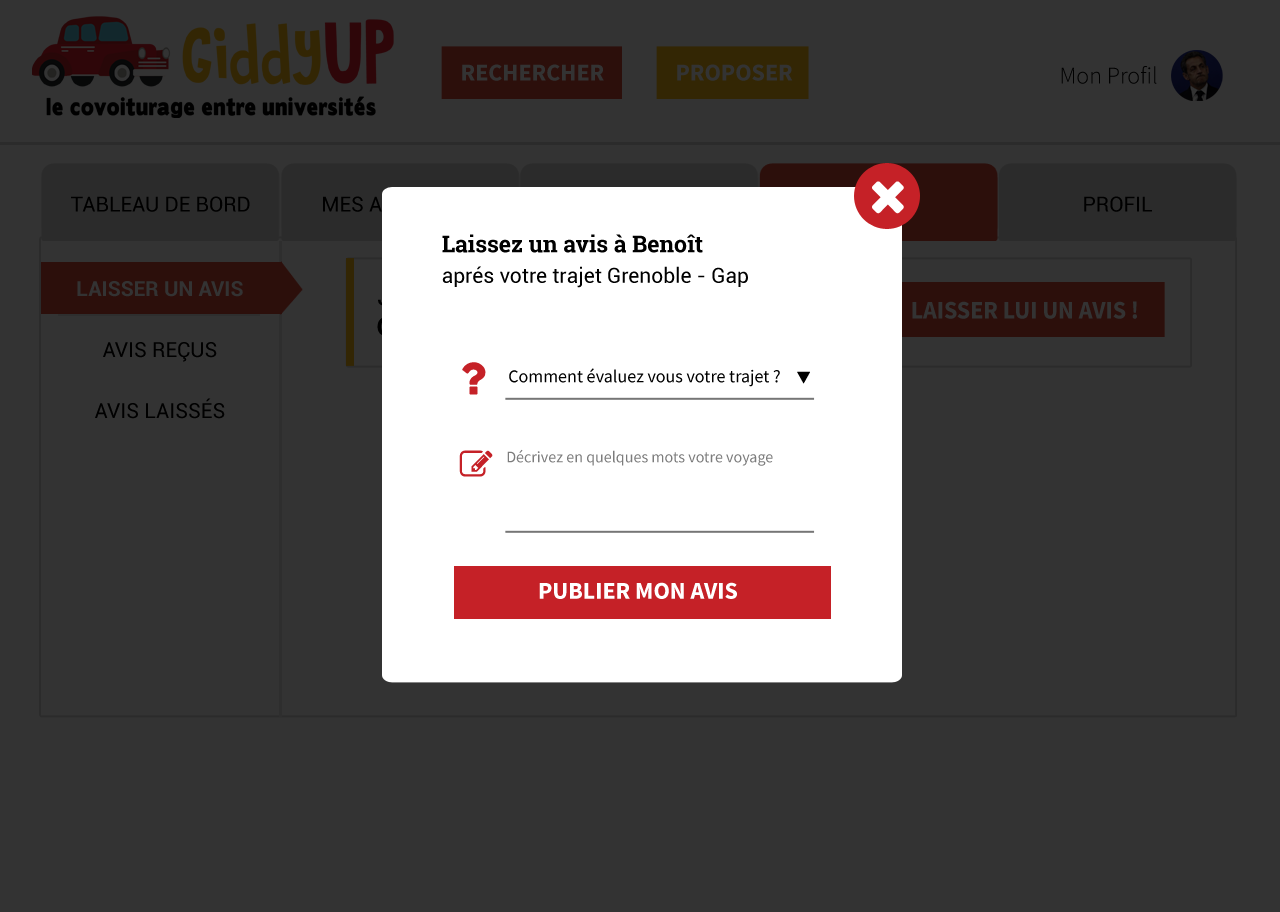
<style>
.page{position:relative;width:1280px;height:912px;background:#333333}
.page>*{position:absolute;margin:0}
.t1{font:24px "SourceSansPro-Bold";color:#333333;text-transform:uppercase}
.t2{font:24px "SourceSansPro-Light";color:#000000}
.t3{font:21px "Roboto-Regular";color:#000000;text-transform:uppercase}
.t4{font:21px/30.5px "Roboto-Regular";color:#000000}
.t5{font:23px/30.5px "RobotoSlab-Bold";color:#000000}
.t6{font:21px/30.5px "Roboto-Regular";text-transform:uppercase}
.t7{font:21px/30.5px "Roboto-Bold";text-transform:uppercase}
.t8{font:25.1px "SourceSansPro-Bold";color:#333333;text-transform:uppercase;scale:0.95 1}
.t9{font:18.1px "SourceSansPro-Regular";color:#000000}
.t10{font:16.1px "SourceSansPro-Regular";color:#7c7c7c}
.t11{font:24px "SourceSansPro-Bold";color:#ffffff;text-transform:uppercase}
</style>
<div class="page">
<p class="t1" style="left:462px;top:64px;width:142px;height:17px">Rechercher</p>
<p class="t1" style="left:677px;top:64px;width:116px;height:17px">proposer</p>
<p class="t2" style="left:1061px;top:66px;width:96px;height:18px">Mon Profil</p>
<p class="t3" style="left:71px;top:196px;width:179px;height:16px">tableau de bord</p>
<p class="t3" style="left:1084px;top:196px;width:68px;height:16px">profil</p>
<p class="t4" style="left:442px;top:234px;width:306px;height:54px"><span class="t5">Laissez un avis à Benoît<br></span>aprés votre trajet Grenoble - Gap</p>
<p class="t6" style="left:77px;top:281px;width:166px;height:138px;text-align:center"><span class="t7">laisser un avis<br></span><br>avis reçus<br><br>avis laissés</p>
<p class="t8" style="left:912px;top:301px;width:225px;height:18px">laisser lui un avis !</p>
<p class="t9" style="left:509px;top:368px;width:271px;height:19px">Comment évaluez vous votre trajet ?</p>
<p class="t10" style="left:507px;top:449px;width:266px;height:17px">Décrivez en quelques mots votre voyage</p>
<p class="t11" style="left:539px;top:582px;width:198px;height:17px">publier mon avis</p>
</div>
